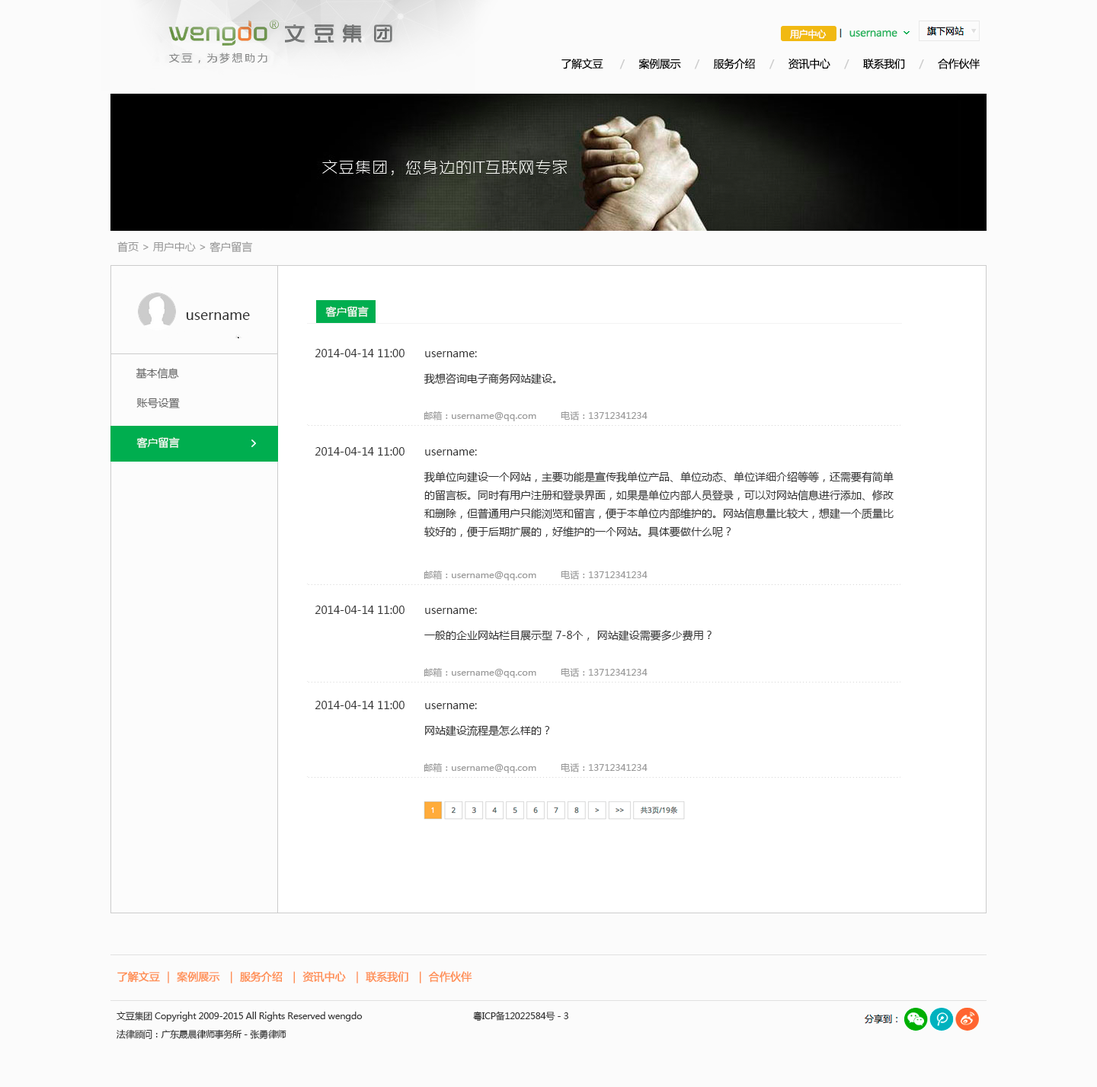
<style>
.page{position:relative;width:1097px;height:1087px;background:#fbfbfb}
.page>*{position:absolute;margin:0}
.t1{font:9.1px "MicrosoftYaHei";letter-spacing:-0.025em;color:#fefefe}
.t2{font:10.7px "MicrosoftYaHei";letter-spacing:-0.025em;color:#23b35c}
.t3{font:10.7px "MicrosoftYaHei";letter-spacing:-0.025em;color:#010101}
.t4{font:10.7px "MicrosoftYaHei";letter-spacing:-0.025em;color:#cccccc}
.t5{font:10.7px "MicrosoftYaHei";color:#999999}
.t6{font:13.7px "MicrosoftYaHei";color:#333333}
.t7{font:10.7px "MicrosoftYaHei";color:#ffffff}
.t8{font:10.7px "MicrosoftYaHei";color:#333333}
.t9{font:10.7px "MicrosoftYaHei";color:#666666}
.t10{font:9.1px "MicrosoftYaHei";color:#999999}
.t11{font:10.7px/18.3px "MicrosoftYaHei";color:#333333}
.t12{font:10.7px "MicrosoftYaHei";letter-spacing:-0.025em;color:#ff8f54;font-weight:bold}
.t13{font:9.1px/18.3px "MicrosoftYaHei";letter-spacing:-0.025em;color:#333333}
</style>
<div class="page">
<p class="t1" style="left:790px;top:29px;width:37px;height:10px">用户中心</p>
<p class="t2" style="left:849px;top:30px;width:48px;height:7px">username</p>
<p class="t3" style="left:561px;top:58px;width:419px;height:11px">了解文豆      <span class="t4">/     </span>案例展示     <span class="t4">/     </span>服务介绍     <span class="t4">/     </span>资讯中心     <span class="t4">/     </span>联系我们     <span class="t4">/     </span>合作伙伴</p>
<p class="t5" style="left:117px;top:241px;width:136px;height:11px">首页 &gt; 用户中心 &gt; 客户留言</p>
<p class="t6" style="left:186px;top:312px;width:64px;height:8px">username</p>
<p class="t7" style="left:325px;top:306px;width:44px;height:11px">客户留言</p>
<p class="t8" style="left:315px;top:349px;width:162px;height:8px">2014-04-14 11:00 username:</p>
<p class="t9" style="left:136px;top:368px;width:43px;height:11px">基本信息</p>
<p class="t8" style="left:424px;top:373px;width:132px;height:12px">我想咨询电子商务网站建设。</p>
<p class="t9" style="left:136px;top:398px;width:44px;height:10px">账号设置</p>
<p class="t10" style="left:424px;top:411px;width:224px;height:10px">邮箱：username@qq.com 电话：13712341234</p>
<p class="t7" style="left:136px;top:437px;width:44px;height:11px">客户留言</p>
<p class="t8" style="left:315px;top:447px;width:162px;height:9px">2014-04-14 11:00 username:</p>
<p class="t11" style="left:424px;top:472px;width:470px;height:66px">我单位向建设一个网站，主要功能是宣传我单位产品、单位动态、单位详细介绍等等，还需要有简单的留言板。同时有用户注册和登录界面，如果是单位内部人员登录，可以对网站信息进行添加、修改和删除，但普通用户只能浏览和留言，便于本单位内部维护的。网站信息量比较大，想建一个质量比较好的，便于后期扩展的，好维护的一个网站。具体要做什么呢？</p>
<p class="t10" style="left:424px;top:570px;width:224px;height:10px">邮箱：username@qq.com 电话：13712341234</p>
<p class="t8" style="left:315px;top:606px;width:162px;height:8px">2014-04-14 11:00 username:</p>
<p class="t8" style="left:424px;top:630px;width:287px;height:11px">一般的企业网站栏目展示型 7-8个， 网站建设需要多少费用？</p>
<p class="t10" style="left:424px;top:667px;width:224px;height:11px">邮箱：username@qq.com 电话：13712341234</p>
<p class="t8" style="left:315px;top:701px;width:162px;height:8px">2014-04-14 11:00 username:</p>
<p class="t8" style="left:425px;top:725px;width:125px;height:12px">网站建设流程是怎么样的？</p>
<p class="t10" style="left:424px;top:763px;width:224px;height:10px">邮箱：username@qq.com 电话：13712341234</p>
<p class="t12" style="left:117px;top:971px;width:355px;height:12px">了解文豆 ｜ 案例展示  ｜ 服务介绍  ｜ 资讯中心  ｜ 联系我们  ｜ 合作伙伴</p>
<p class="t13" style="left:117px;top:1011px;width:451px;height:28px">文豆集团 Copyright 2009-2015 All Rights Reserved wengdo     粤ICP备12022584号－3<br>法律顾问：广东晟晨律师事务所－张勇律师</p>
</div>
